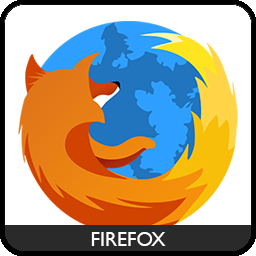
<style>
.page{position:relative;width:256px;height:256px;background:#ffffff}
.page>*{position:absolute;margin:0}
.t1{font:20px "GillSansMT";color:#ffffff}
</style>
<div class="page">
<p class="t1" style="left:91px;top:232px;width:75px;height:14px">FIREFOX</p>
</div>
